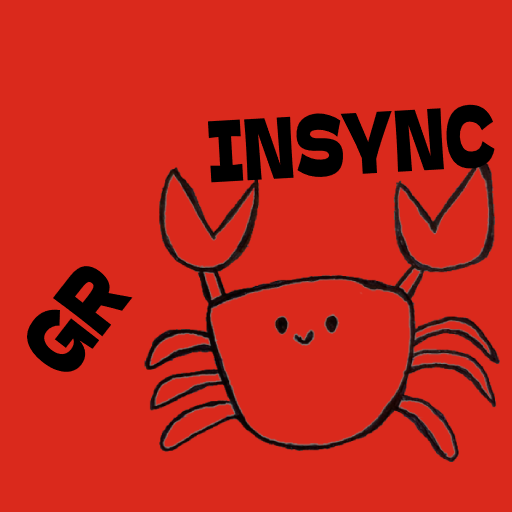
<style>
.page{position:relative;width:512px;height:512px;background:#da291c}
.page>*{position:absolute;margin:0}
.t1{font:84.1px "DelaGothicOne-Regular";color:#000000;scale:0.65 1}
.t2{font:85.9px "DelaGothicOne-Regular";color:#000000;scale:0.72 1}
</style>
<div class="page">
<p class="t1" style="left:208px;top:104px;width:287px;height:79px;rotate:-3deg">INSYNC</p>
<p class="t2" style="left:27px;top:266px;width:106px;height:106px;rotate:-52deg">GR</p>
</div>
